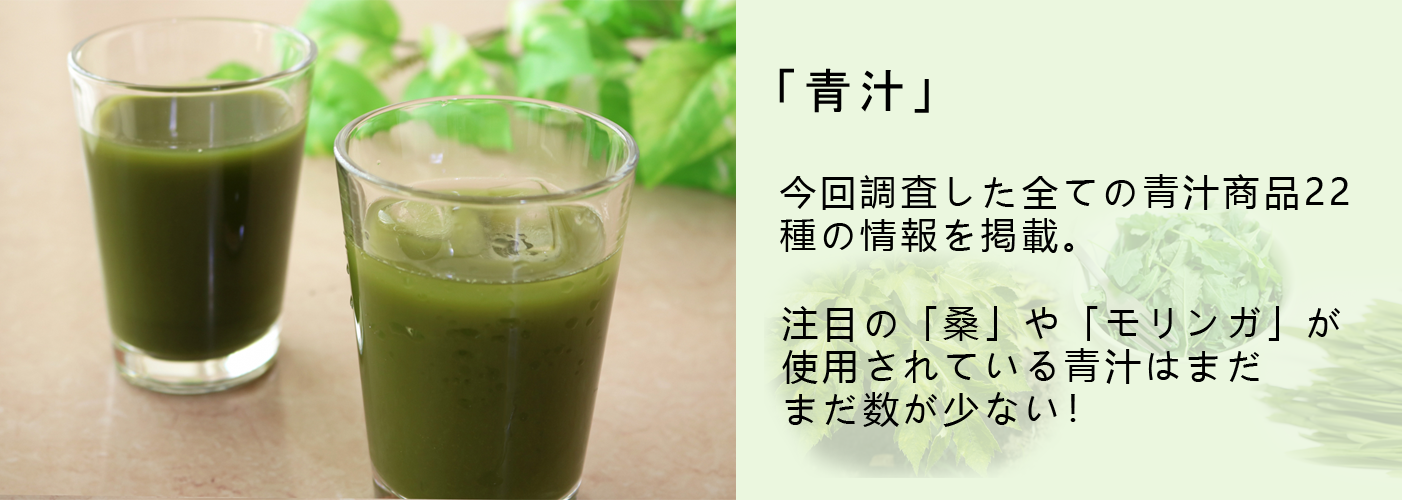
<style>
.page{position:relative;width:1402px;height:500px;background:#ebf7df}
.page>*{position:absolute;margin:0}
.t1{font:48px "MS-PGothic";letter-spacing:0.12em;color:#000000}
.t2{font:36px "MicrosoftYaHei";letter-spacing:0.12em;color:#000000}
</style>
<div class="page">
<p class="t1" style="left:779px;top:68px;width:150px;height:45px">「青汁」</p>
<p class="t2" style="left:780px;top:174px;width:569px;height:79px">今回調査した全ての青汁商品22<br>種の情報を掲載。</p>
<p class="t2" style="left:782px;top:306px;width:558px;height:121px">注目の「桑」や「モリンガ」が<br>使用されている青汁はまだ<br>まだ数が少ない！</p>
</div>
